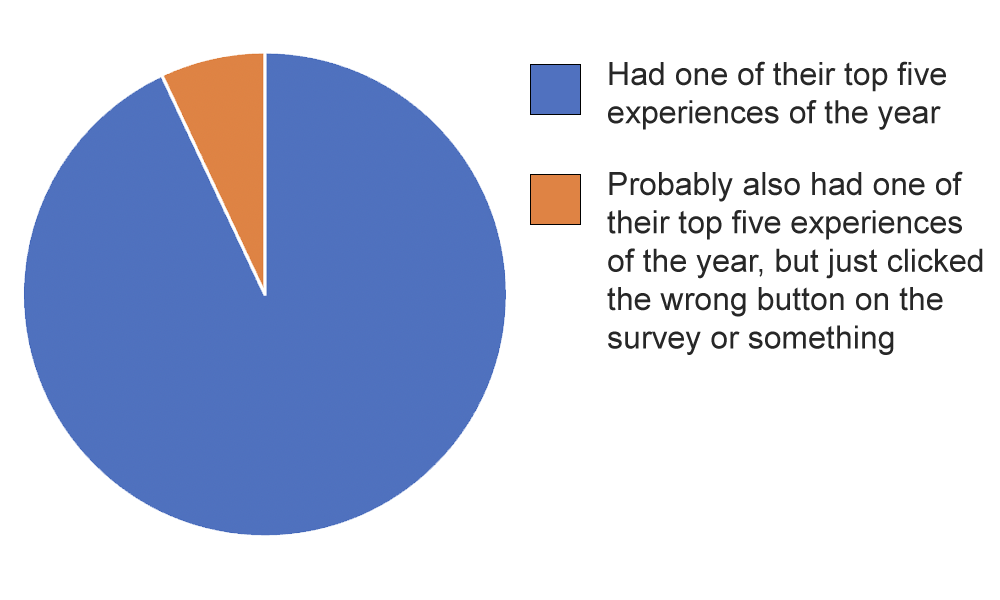
<style>
.page{position:relative;width:1000px;height:600px;background:#ffffff}
.page>*{position:absolute;margin:0}
.t1{font:32px "ArialMT";color:#272727}
</style>
<div class="page">
<p class="t1" style="left:608px;top:61px;width:338px;height:69px">Had one of their top five experiences of the year</p>
<p class="t1" style="left:607px;top:171px;width:376px;height:184px">Probably also had one of their top five experiences<br>of the year, but just clicked the wrong button on the survey or something</p>
</div>
